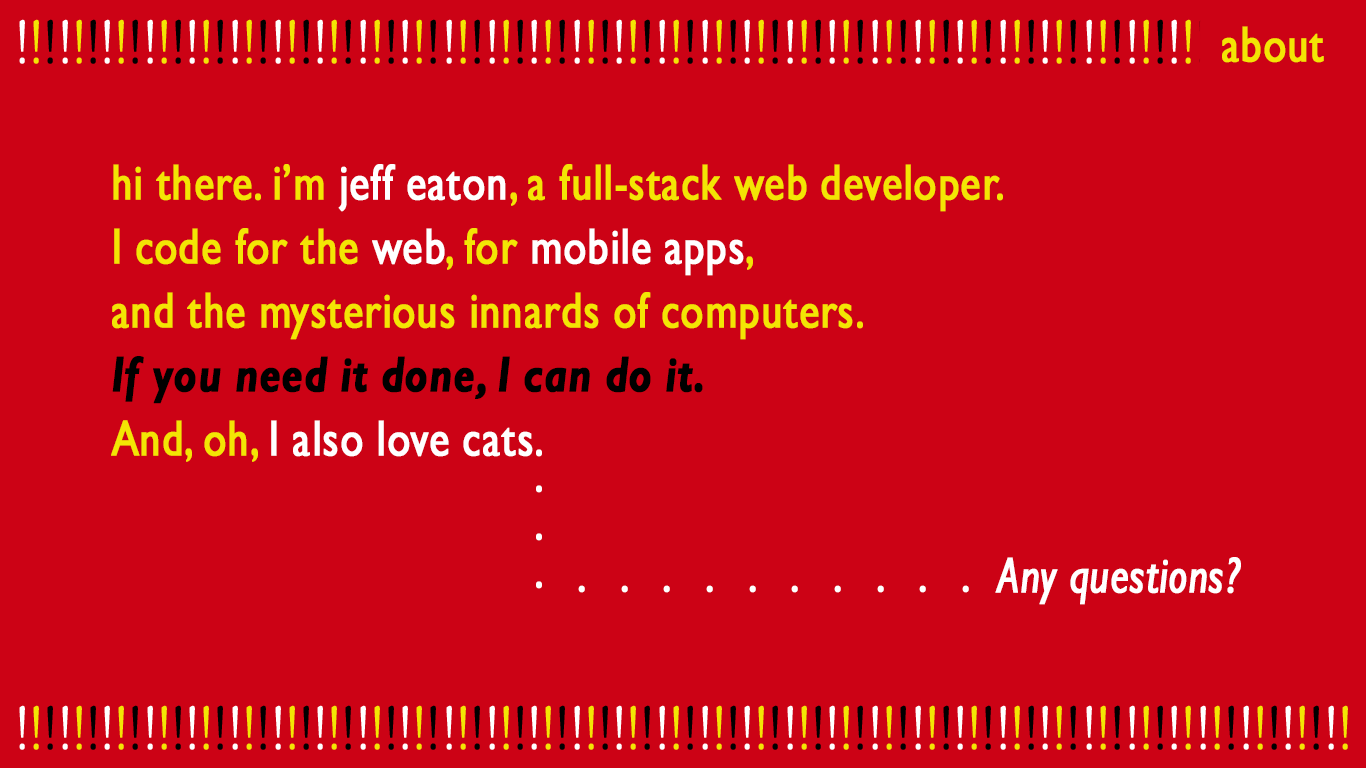
<style>
.page{position:relative;width:1366px;height:768px;background:#cc0215}
.page>*{position:absolute;margin:0}
.t1{font:50.4px "GillSansMT";letter-spacing:0.01em;color:#f3e504;font-weight:bold;scale:0.81 1}
.t2{font:50.4px/16px "GillSansMT";letter-spacing:0.01em;color:#f3e504;font-weight:bold;scale:0.81 1}
.t3{font:50.4px/16px "GillSansMT";letter-spacing:0.01em;color:#ffffff;font-weight:bold;scale:0.81 1}
.t4{font:50.4px/16px "GillSansMT-BoldItalic";letter-spacing:0.01em;color:#000000;font-weight:bold;scale:0.81 1}
.t5{font:50.4px "GillSansMT-Italic";letter-spacing:0.01em;color:#ffffff;font-weight:bold;scale:0.81 1}
</style>
<div class="page">
<p class="t1" style="left:1222px;top:26px;width:102px;height:37px">about</p>
<p class="t2" style="left:111px;top:164px;width:892px;height:298px">hi there. i’m <span class="t3">jeff eaton</span>, a full-stack web developer.<br><br><br><br>I code for the <span class="t3">web</span>, for <span class="t3">mobile apps</span>,<br><br><br><br>and the mysterious innards of computers.<br><br><br><span class="t4"><br>If you need it done, I can do it. <br></span><br><br><br>And, oh, <span class="t3">I also love cats.</span></p>
<p class="t3" style="left:536px;top:485px;width:6px;height:104px;text-align:right">.<br><br><br>.<br><br><br>.</p>
<p class="t5" style="left:995px;top:557px;width:246px;height:48px">Any questions?</p>
<p class="t5" style="left:578px;top:585px;width:391px;height:8px">.   .   .   .   .   .   .   .   .   .</p>
</div>
